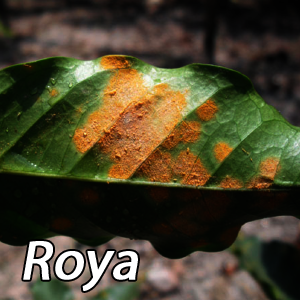
<style>
.page{position:relative;width:300px;height:300px}
.page>*{position:absolute;margin:0}
.t1{font:55.6px "MyriadPro-Regular";color:#ffffff;font-weight:bold;font-style:italic}
</style>
<div class="page">
<p class="t1" style="left:23px;top:241px;width:115px;height:50px">Roya</p>
</div>
